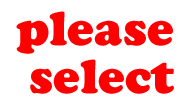
<style>
.page{position:relative;width:192px;height:108px;background:#ffffff}
.page>*{position:absolute;margin:0}
.t1{font:47.8px/47.8px "CooperBlackStd";color:#ff0000}
</style>
<div class="page">
<p class="t1" style="left:16px;top:11px;width:158px;height:83px;text-align:center">please <br>select</p>
</div>
